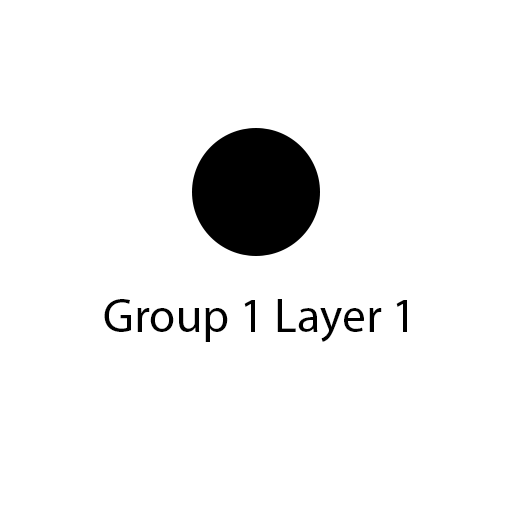
<style>
.page{position:relative;width:512px;height:512px;background:#ffffff}
.page>*{position:absolute;margin:0}
.t1{font:48px "MyriadPro-Regular";color:#000000}
</style>
<div class="page">
<p class="t1" style="left:104px;top:299px;width:303px;height:43px">Group 1 Layer 1</p>
</div>
